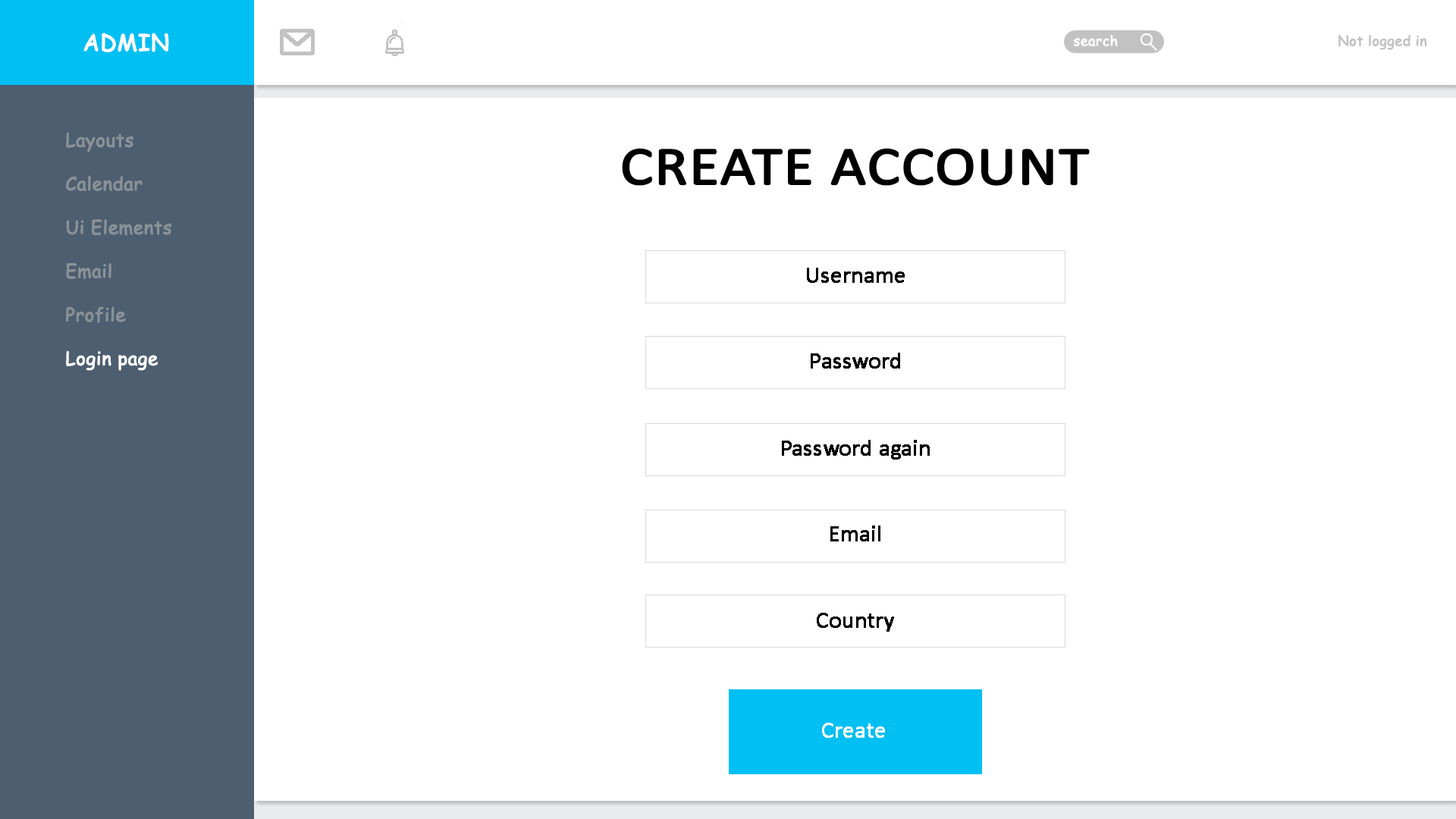
<style>
.page{position:relative;width:1456px;height:819px;background:#ffffff}
.page>*{position:absolute;margin:0}
.t1{font:22.7px "ComicSansMS";color:#ffffff;font-weight:bold}
.t2{font:13.6px "ComicSansMS";color:#fefefe;font-weight:bold}
.t3{font:18.2px "ComicSansMS";color:#899297;font-weight:bold}
.t4{font:18.2px "ComicSansMS";color:#ffffff;font-weight:bold}
.t5{font:54.6px "Calibri";color:#000000;font-weight:bold;scale:1.12 1}
.t6{font:22.7px "Calibri";color:#000000;font-weight:bold}
.t7{font:22.7px "Calibri";color:#fefefe;font-weight:bold}
</style>
<div class="page">
<p class="t1" style="left:83px;top:33px;width:86px;height:19px">ADMIN</p>
<p class="t2" style="left:1073px;top:34px;width:45px;height:13px">search</p>
<p class="t3" style="left:66px;top:132px;width:105px;height:239px">Layouts<br><br>Calendar<br><br>Ui Elements<br><br>Email<br><br>Profile<br><br><span class="t4">Login page</span></p>
<p class="t5" style="left:622px;top:148px;width:468px;height:38px">CREATE ACCOUNT</p>
<p class="t6" style="left:807px;top:268px;width:98px;height:15px">Username</p>
<p class="t6" style="left:811px;top:353px;width:89px;height:16px">Password</p>
<p class="t6" style="left:782px;top:440px;width:148px;height:20px">Password again</p>
<p class="t6" style="left:830px;top:526px;width:50px;height:15px">Email</p>
<p class="t6" style="left:817px;top:613px;width:77px;height:19px">Country</p>
<p class="t7" style="left:822px;top:723px;width:63px;height:15px">Create</p>
</div>
